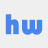
<style>
.page{position:relative;width:48px;height:48px;background:#efefef}
.page>*{position:absolute;margin:0}
.t1{font:30px "Bauhaus93";color:#4885ed}
</style>
<div class="page">
<p class="t1" style="left:5px;top:14px;width:38px;height:21px">hw</p>
</div>
